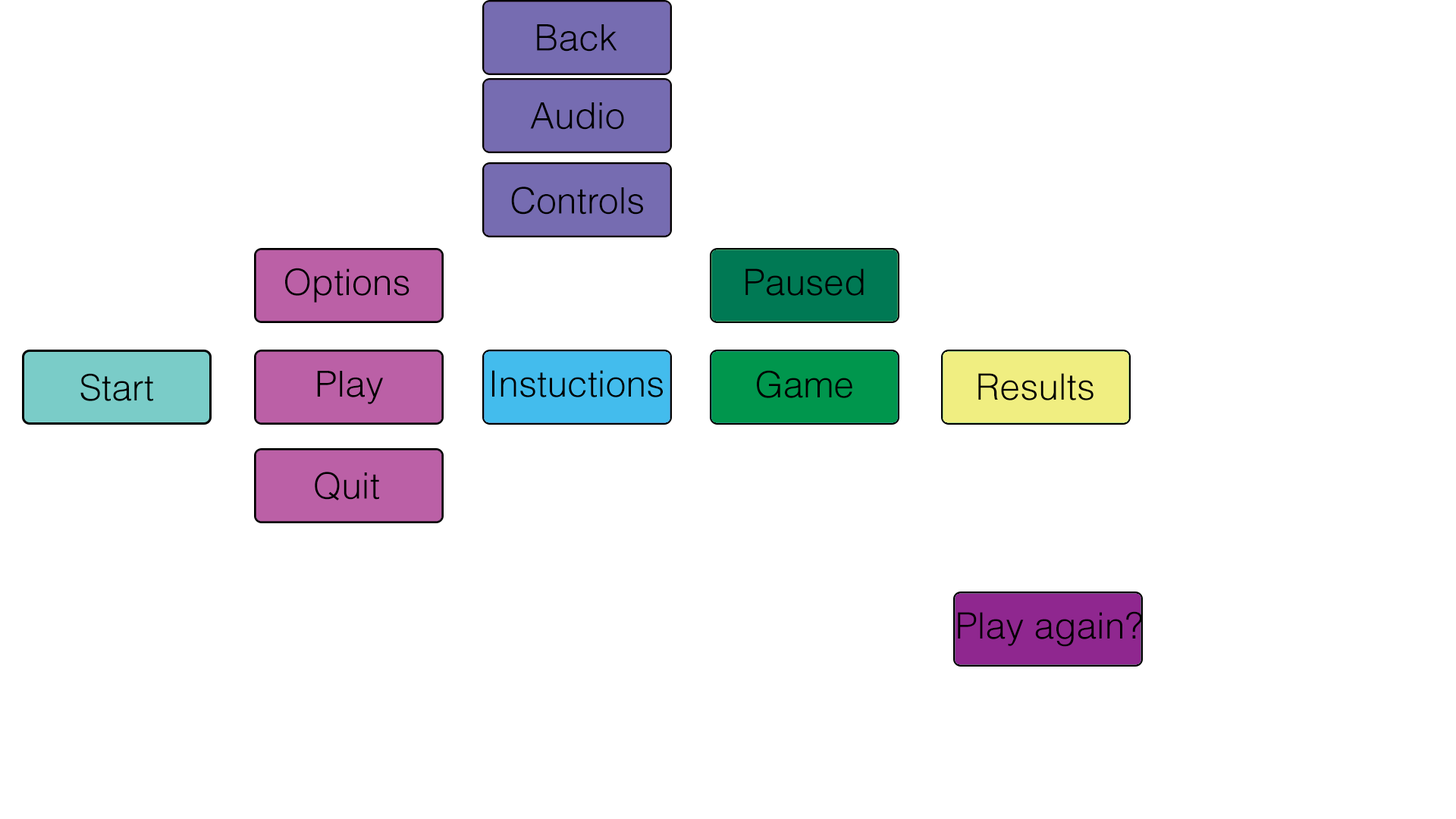
<style>
.page{position:relative;width:1456px;height:819px;background:#ffffff}
.page>*{position:absolute;margin:0}
.t1{font:36.4px "HelvLight-Normal";color:#000000}
.t2{font:36.1px "HelvLight-Normal";color:#000000}
</style>
<div class="page">
<p class="t1" style="left:537px;top:24px;width:80px;height:28px">Back</p>
<p class="t1" style="left:530px;top:102px;width:94px;height:28px">Audio</p>
<p class="t1" style="left:511px;top:187px;width:132px;height:28px">Controls</p>
<p class="t1" style="left:285px;top:268px;width:124px;height:35px">Options</p>
<p class="t1" style="left:745px;top:268px;width:119px;height:28px">Paused</p>
<p class="t1" style="left:80px;top:373px;width:73px;height:28px">Start</p>
<p class="t2" style="left:317px;top:371px;width:66px;height:33px">Play</p>
<p class="t1" style="left:492px;top:370px;width:171px;height:27px">Instuctions</p>
<p class="t1" style="left:757px;top:370px;width:95px;height:28px">Game</p>
<p class="t1" style="left:978px;top:373px;width:116px;height:27px">Results</p>
<p class="t1" style="left:315px;top:472px;width:64px;height:28px">Quit</p>
<p class="t1" style="left:958px;top:611px;width:184px;height:36px">Play again?</p>
</div>
